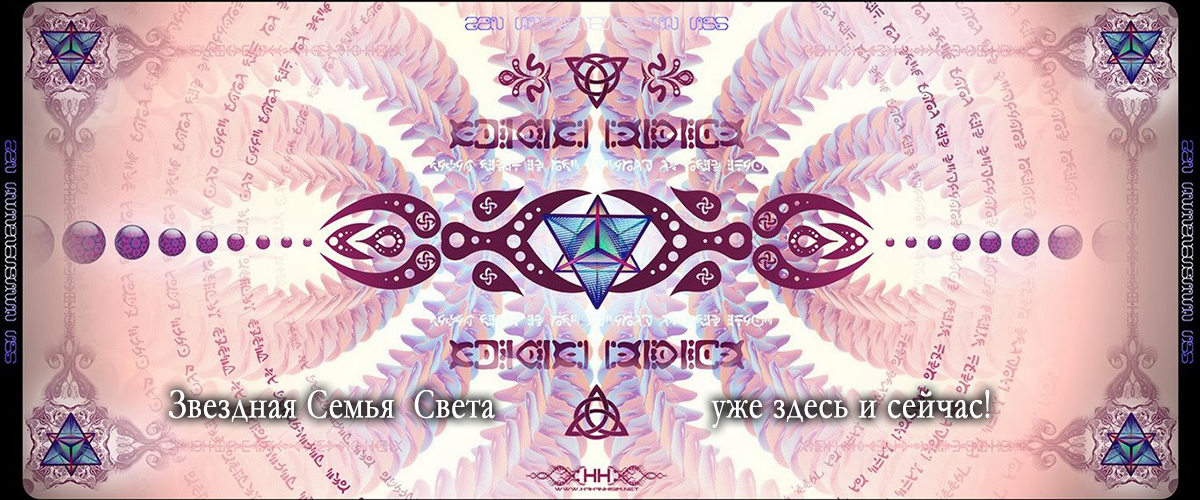
<style>
.page{position:relative;width:1200px;height:500px}
.page>*{position:absolute;margin:0}
.t1{font:42.2px "Garamond";color:#ffffff;font-weight:bold;scale:0.8 1}
</style>
<div class="page">
<p class="t1" style="left:169px;top:390px;width:326px;height:32px">Звездная Семья  Света</p>
<p class="t1" style="left:711px;top:390px;width:279px;height:38px">уже здесь и сейчас!</p>
</div>
